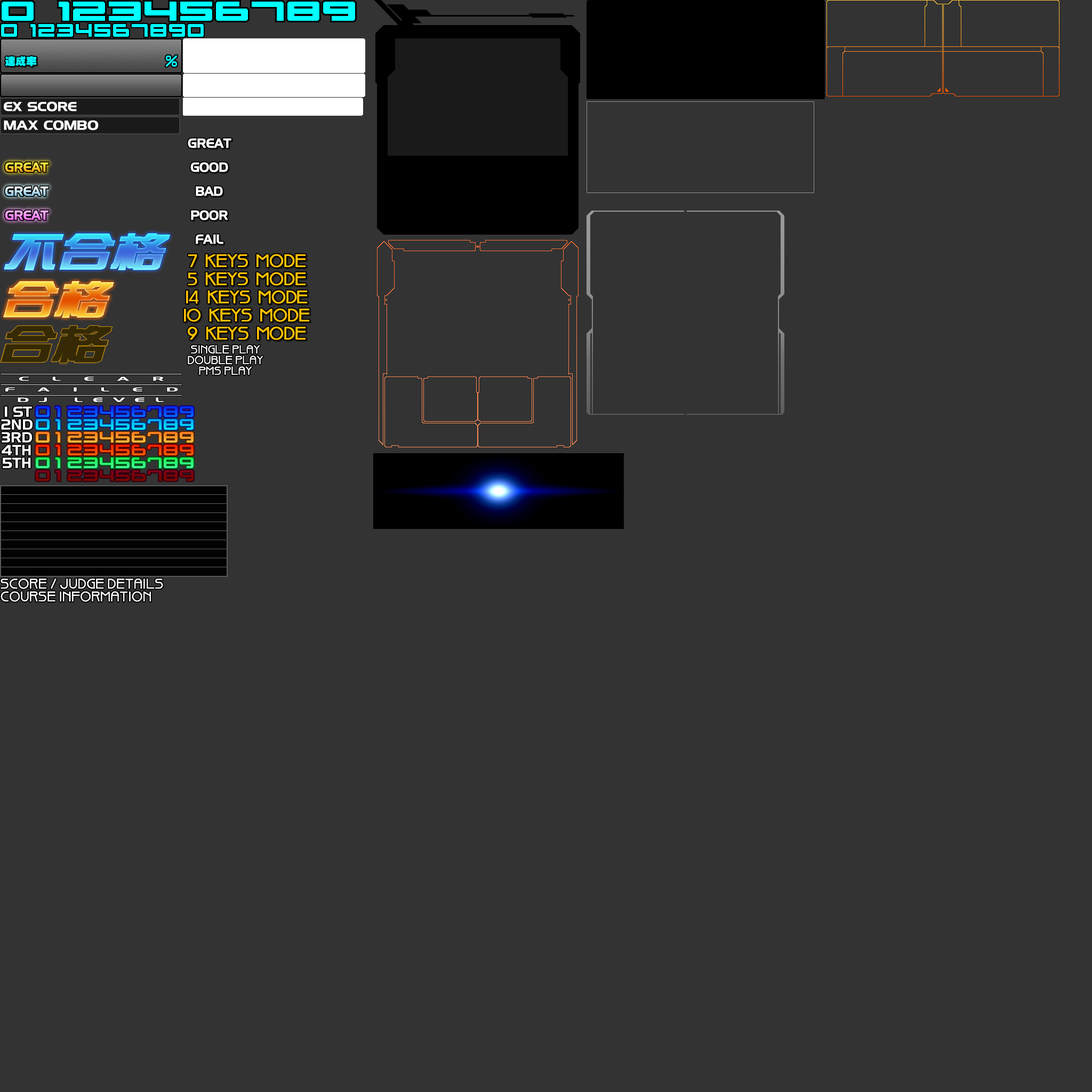
<style>
.page{position:relative;width:1092px;height:1092px;background:#333333}
.page>*{position:absolute;margin:0}
.t1{font:10.7px "DFGothicPro6N-W12";color:#00ffff}
.t2{font:12.5px "HanzelBold";letter-spacing:0.01em;color:#ffffff;scale:1.12 1}
.t3{font:12.8px "HanzelBold";color:#ffffff}
.t4{font:12.8px "HanzelBold"}
.t5{font:17.1px "Hemara-Bold";color:#ffc000;font-weight:bold}
.t6{font:16.3px "AvantGardeBook";color:#ffc000;font-weight:bold}
.t7{font:10.7px "Hemara-Bold";letter-spacing:0.05em;color:#ffffff}
.t8{font:6.1px "HanzelWideNormal";letter-spacing:0.75em;color:#ffffff;scale:2.21 1}
.t9{font:14.2px "HandelGothicBT-Regular";letter-spacing:-0.01em;color:#ffffff}
.t10{font:14.2px "HandelGothicBT-Regular";letter-spacing:-0.03em;color:#ffffff}
.t11{font:14.2px "HandelGothicBT-Regular";letter-spacing:0.01em;color:#ffffff}
.t12{font:13.1px "Hemara-Bold";letter-spacing:0.05em;color:#ffffff}
</style>
<div class="page">
<p class="t1" style="left:5px;top:56px;width:32px;height:11px">達成率</p>
<p class="t2" style="left:4px;top:101px;width:73px;height:10px">EX SCORE</p>
<p class="t3" style="left:188px;top:138px;width:43px;height:10px">GREAT</p>
<p class="t4" style="left:5px;top:162px;width:44px;height:10px">GREAT</p>
<p class="t3" style="left:190px;top:162px;width:38px;height:10px">GOOD</p>
<p class="t4" style="left:5px;top:186px;width:44px;height:10px">GREAT</p>
<p class="t3" style="left:196px;top:186px;width:27px;height:10px">BAD</p>
<p class="t4" style="left:5px;top:210px;width:44px;height:10px">GREAT</p>
<p class="t3" style="left:191px;top:210px;width:37px;height:10px">POOR</p>
<p class="t3" style="left:196px;top:234px;width:27px;height:10px">FAIL</p>
<p class="t5" style="left:188px;top:254px;width:118px;height:14px">7  KEYS  MODE</p>
<p class="t5" style="left:188px;top:272px;width:118px;height:14px">5  KEYS  MODE</p>
<p class="t5" style="left:186px;top:290px;width:122px;height:14px">1<span class="t6">4</span>  KEYS  MODE</p>
<p class="t5" style="left:184px;top:308px;width:126px;height:14px">10  KEYS  MODE</p>
<p class="t5" style="left:188px;top:326px;width:118px;height:14px">9  KEYS  MODE</p>
<p class="t7" style="left:191px;top:345px;width:69px;height:9px">SINGLE PLAY</p>
<p class="t7" style="left:188px;top:356px;width:75px;height:8px">DOUBLE PLAY</p>
<p class="t7" style="left:199px;top:366px;width:53px;height:9px">PMS PLAY</p>
<p class="t8" style="left:18px;top:397px;width:146px;height:5px">DJ LEVEL</p>
<p class="t9" style="left:5px;top:406px;width:27px;height:11px">1<span class="t10"> S</span><span class="t11">T</span></p>
<p class="t11" style="left:1px;top:419px;width:32px;height:11px">2ND</p>
<p class="t11" style="left:2px;top:432px;width:30px;height:11px">3RD</p>
<p class="t11" style="left:2px;top:445px;width:29px;height:10px">4TH</p>
<p class="t11" style="left:3px;top:457px;width:28px;height:11px">5TH</p>
<p class="t12" style="left:1px;top:579px;width:162px;height:10px">SCORE / JUDGE DETAILS</p>
<p class="t12" style="left:1px;top:591px;width:150px;height:11px">COURSE INFORMATION</p>
</div>
